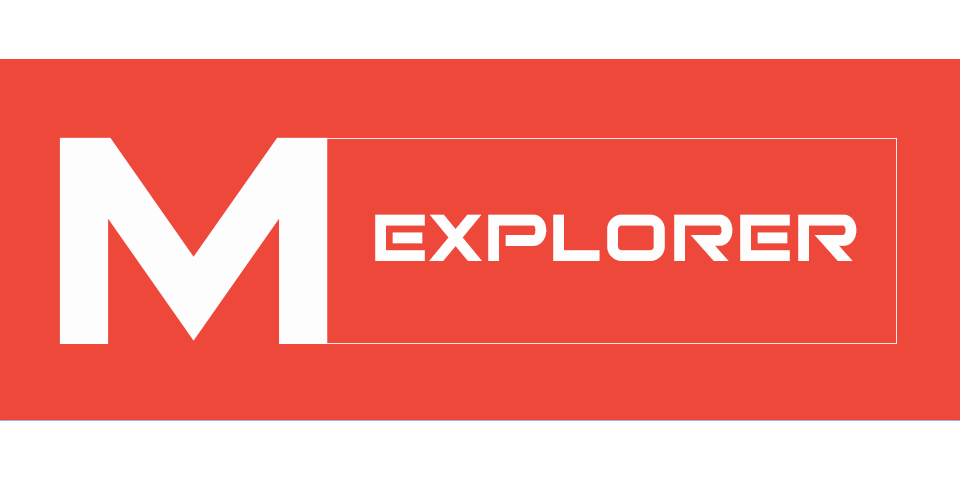
<style>
.page{position:relative;width:960px;height:480px;background:#ee483a}
.page>*{position:absolute;margin:0}
.t1{font:400px "UTM-Bitsumishi-Pro";letter-spacing:0.05em;color:#fdfdfe}
.t2{font:90px "UTM-Bitsumishi-Pro";letter-spacing:0.05em;color:#fdfdfe}
</style>
<div class="page">
<p class="t1" style="left:59px;top:137px;width:269px;height:207px">M</p>
<p class="t2" style="left:375px;top:214px;width:482px;height:47px">explorer</p>
</div>
